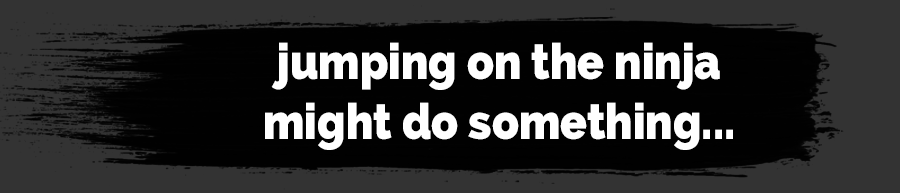
<style>
.page{position:relative;width:900px;height:193px;background:#010101}
.page>*{position:absolute;margin:0}
.t1{font:50px "Raleway-Heavy";color:#ffffff;scale:0.88 1}
</style>
<div class="page">
<p class="t1" style="left:265px;top:42px;width:468px;height:108px;text-align:center">jumping on the ninja<br>might do something...</p>
</div>
